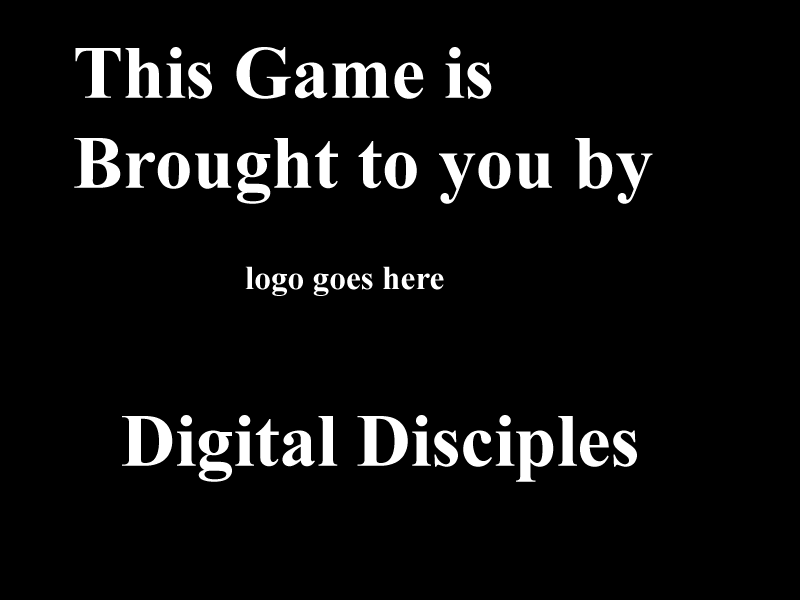
<style>
.page{position:relative;width:800px;height:600px;background:#000000}
.page>*{position:absolute;margin:0}
.t1{font:75px "TimesNewRomanPS-BoldMT";color:#ffffff}
.t2{font:33.3px "TimesNewRomanPS-BoldMT";color:#ffffff}
</style>
<div class="page">
<p class="t1" style="left:74px;top:47px;width:579px;height:157px">This Game is Brought to you by</p>
<p class="t2" style="left:245px;top:266px;width:199px;height:30px">logo goes here</p>
<p class="t1" style="left:122px;top:415px;width:515px;height:67px">Digital Disciples</p>
</div>
